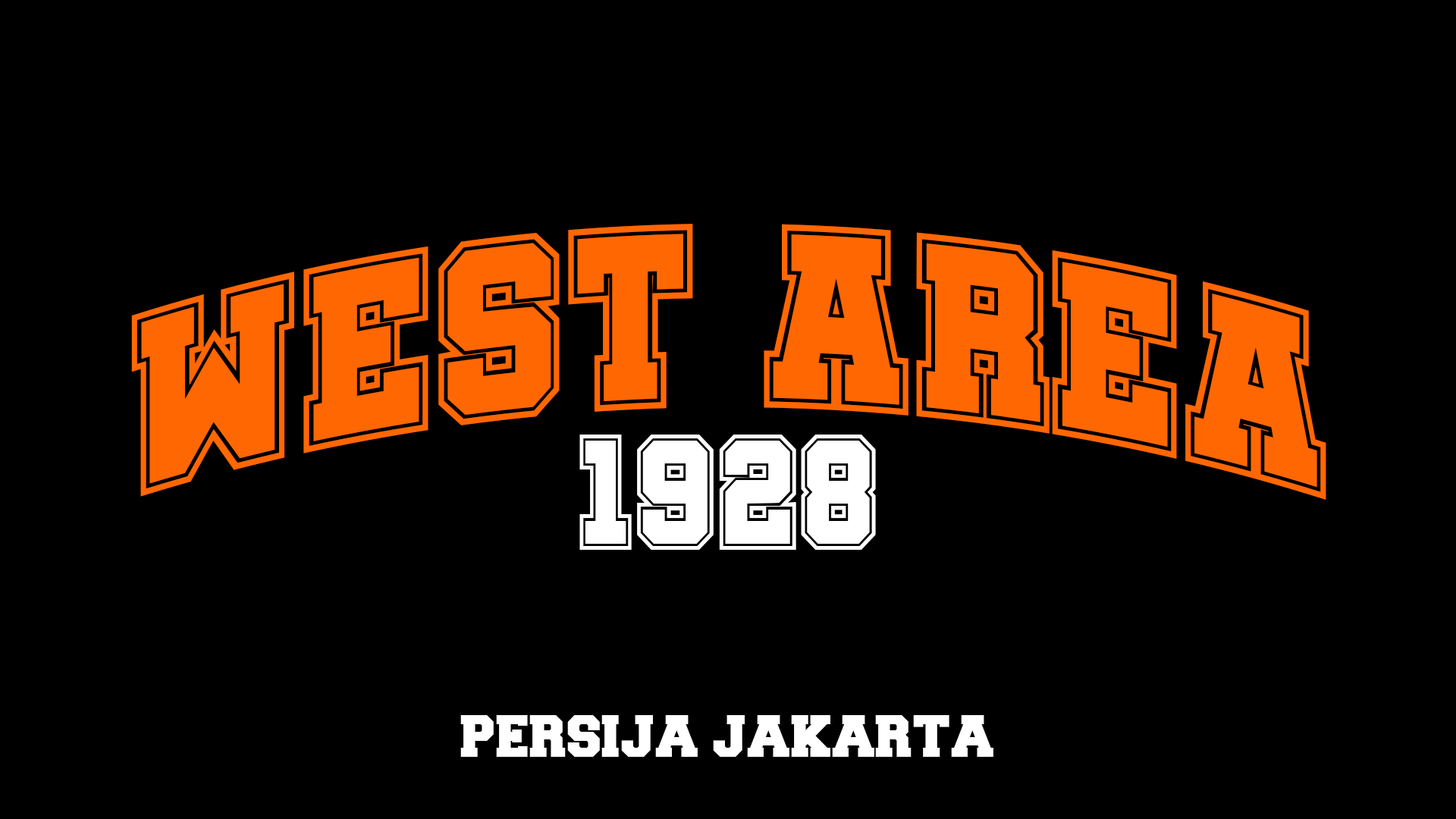
<style>
.page{position:relative;width:1456px;height:819px;background:#000000}
.page>*{position:absolute;margin:0}
.t1{font:265px "SoccerLeagueCollege-Regular";color:#ff6702}
.t2{font:167.1px "SoccerLeagueCollege-Regular";color:#ffffff}
.t3{font:50.2px "Freshman";color:#ffffff}
</style>
<div class="page">
<p class="t1" style="left:131px;top:224px;width:1195px;height:276px">WEST AREA</p>
<p class="t2" style="left:579px;top:435px;width:297px;height:115px">1928</p>
<p class="t3" style="left:460px;top:715px;width:533px;height:42px">PERSIJA JAKARTA</p>
</div>
